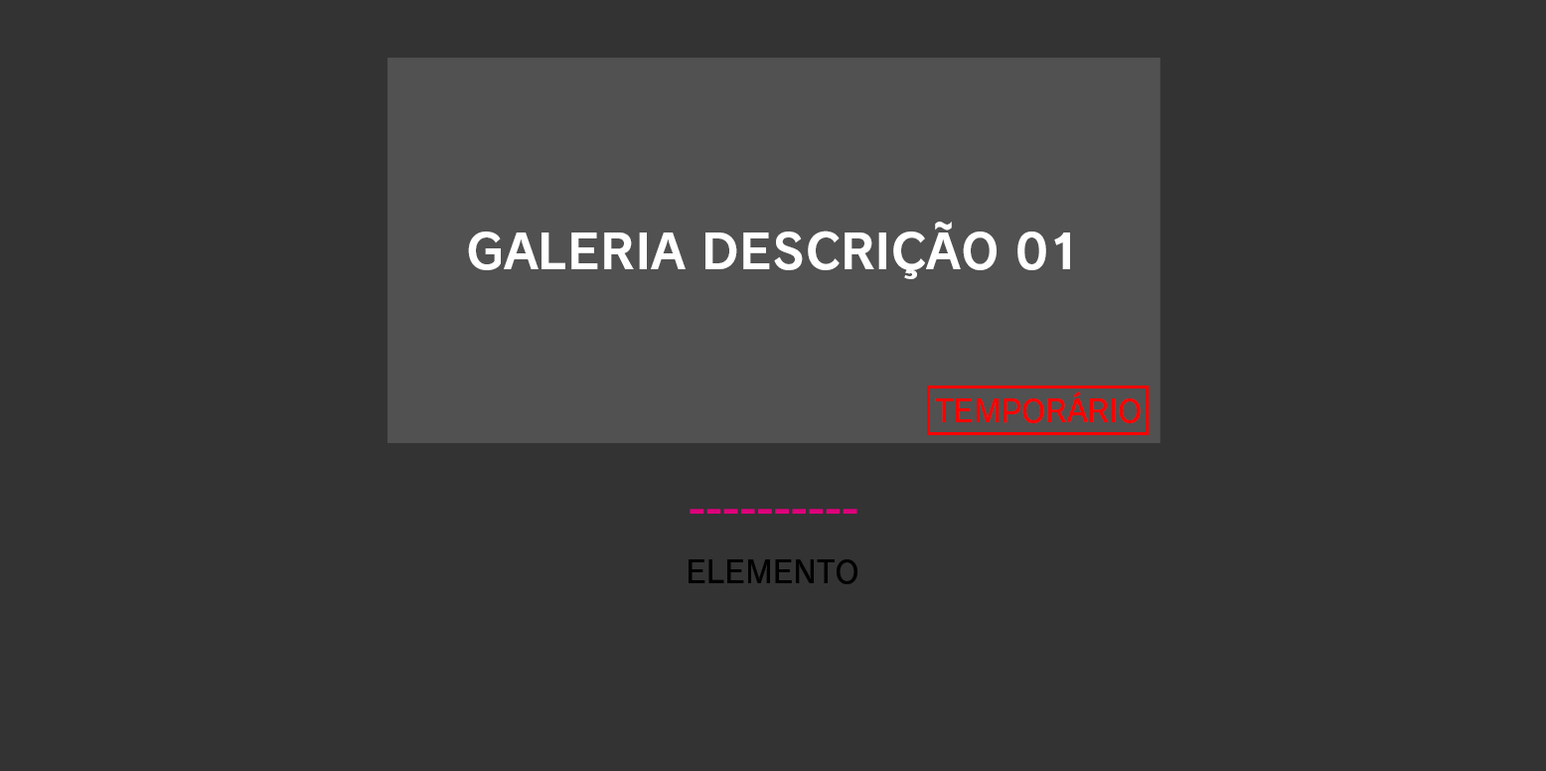
<style>
.page{position:relative;width:1546px;height:771px;background:#333333}
.page>*{position:absolute;margin:0}
.t1{font:47.7px "RodinNTLGPro-B";color:#ffffff}
.t2{font:30.5px "RodinProN-DB";letter-spacing:-0.014em;color:#ff0000}
.t3{font:30.5px "RodinNTLGPro-DB";color:#010101}
</style>
<div class="page">
<p class="t1" style="left:468px;top:222px;width:602px;height:57px">GALERIA DESCRIÇÃO 01</p>
<p class="t2" style="left:935px;top:392px;width:206px;height:31px">TEMPORÁRIO</p>
<p class="t3" style="left:689px;top:559px;width:169px;height:25px">ELEMENTO</p>
</div>
